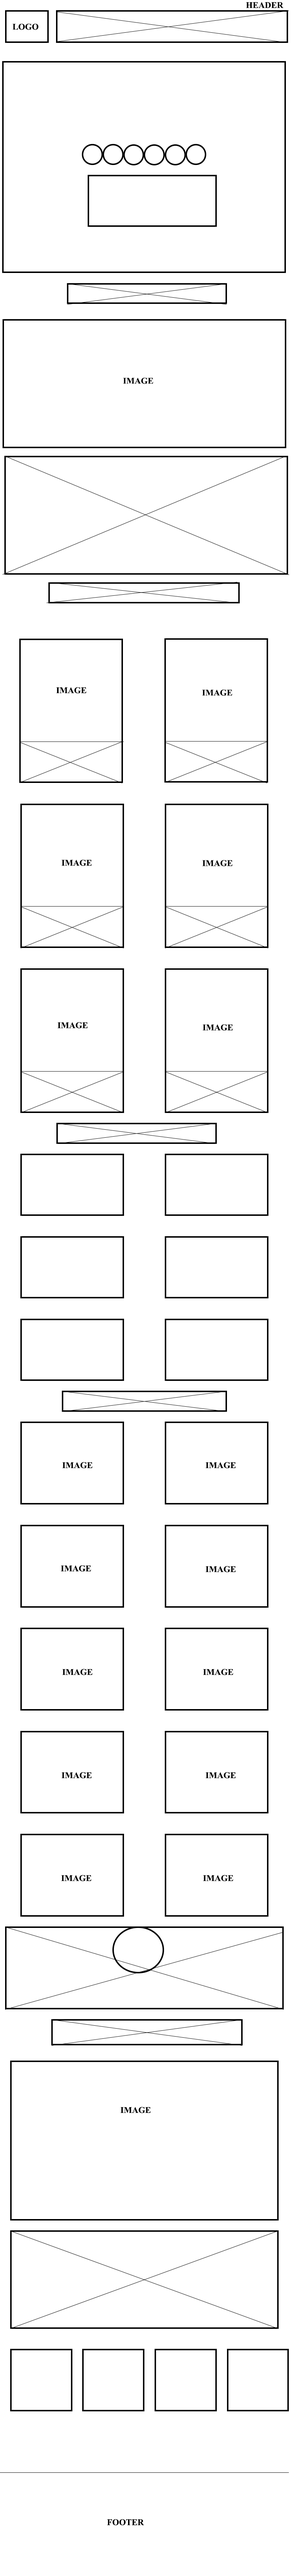
<style>
.page{position:relative;width:291px;height:2576px;background:#ffffff}
.page>*{position:absolute;margin:0}
.t1{font:8.7px "TimesNewRomanPS-BoldMT";color:#000000}
</style>
<div class="page">
<p class="t1" style="left:246px;top:2px;width:37px;height:6px">HEADER</p>
<p class="t1" style="left:12px;top:24px;width:27px;height:6px">LOGO</p>
<p class="t1" style="left:123px;top:378px;width:30px;height:6px">IMAGE</p>
<p class="t1" style="left:56px;top:687px;width:31px;height:7px">IMAGE</p>
<p class="t1" style="left:202px;top:690px;width:30px;height:6px">IMAGE</p>
<p class="t1" style="left:61px;top:860px;width:31px;height:6px">IMAGE</p>
<p class="t1" style="left:202px;top:860px;width:30px;height:6px">IMAGE</p>
<p class="t1" style="left:57px;top:1022px;width:31px;height:6px">IMAGE</p>
<p class="t1" style="left:202px;top:1024px;width:31px;height:6px">IMAGE</p>
<p class="t1" style="left:62px;top:1462px;width:30px;height:6px">IMAGE</p>
<p class="t1" style="left:205px;top:1462px;width:31px;height:6px">IMAGE</p>
<p class="t1" style="left:61px;top:1565px;width:30px;height:7px">IMAGE</p>
<p class="t1" style="left:205px;top:1566px;width:31px;height:6px">IMAGE</p>
<p class="t1" style="left:62px;top:1669px;width:30px;height:6px">IMAGE</p>
<p class="t1" style="left:203px;top:1669px;width:30px;height:6px">IMAGE</p>
<p class="t1" style="left:61px;top:1772px;width:31px;height:7px">IMAGE</p>
<p class="t1" style="left:205px;top:1772px;width:31px;height:7px">IMAGE</p>
<p class="t1" style="left:61px;top:1875px;width:30px;height:6px">IMAGE</p>
<p class="t1" style="left:203px;top:1875px;width:30px;height:6px">IMAGE</p>
<p class="t1" style="left:120px;top:2107px;width:30px;height:6px">IMAGE</p>
<p class="t1" style="left:107px;top:2519px;width:37px;height:6px">FOOTER</p>
</div>
